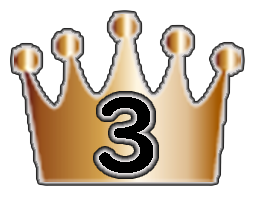
<style>
.page{position:relative;width:256px;height:204px;background:#ffffff}
.page>*{position:absolute;margin:0}
.t1{font:100px "UDDigiKyokashoNP-B";color:#000000}
</style>
<div class="page">
<p class="t1" style="left:99px;top:97px;width:54px;height:76px">3</p>
</div>
